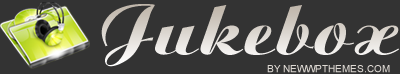
<style>
.page{position:relative;width:400px;height:74px;background:#333333}
.page>*{position:absolute;margin:0}
.t1{font:72px "BitScript"}
.t2{font:10px "ArialMT";color:#ded9d3;text-transform:uppercase}
</style>
<div class="page">
<p class="t1" style="left:101px;top:4px;width:298px;height:63px">Jukebox</p>
<p class="t2" style="left:267px;top:65px;width:123px;height:8px">by NewWpThemes.com</p>
</div>
